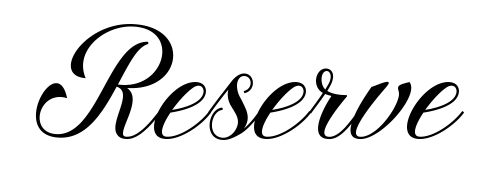
<style>
.page{position:relative;width:500px;height:172px;background:#ffffff}
.page>*{position:absolute;margin:0}
.t1{font:125px "AngeltaScript";color:#000000}
</style>
<div class="page">
<p class="t1" style="left:35px;top:24px;width:429px;height:116px">Reserve</p>
</div>
